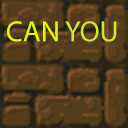
<style>
.page{position:relative;width:128px;height:128px}
.page>*{position:absolute;margin:0}
.t1{font:29.2px "MyriadPro-Regular";color:#e0fb00}
.t2{font:29.2px "MyriadPro-Regular";color:#d2e530}
</style>
<div class="page">
<p class="t1" style="left:7px;top:21px;width:110px;height:21px">CAN <span class="t2">YOU</span></p>
</div>
